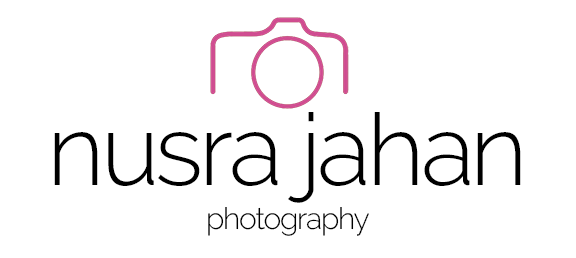
<style>
.page{position:relative;width:576px;height:258px;background:#ffffff}
.page>*{position:absolute;margin:0}
.t1{font:100px "Raleway-Light";letter-spacing:-0.04em;color:#000000}
.t2{font:30px "Raleway-Light";letter-spacing:-0.04em;color:#000000}
</style>
<div class="page">
<p class="t1" style="left:54px;top:112px;width:467px;height:91px">nusra jahan</p>
<p class="t2" style="left:208px;top:207px;width:161px;height:29px">photography</p>
</div>
